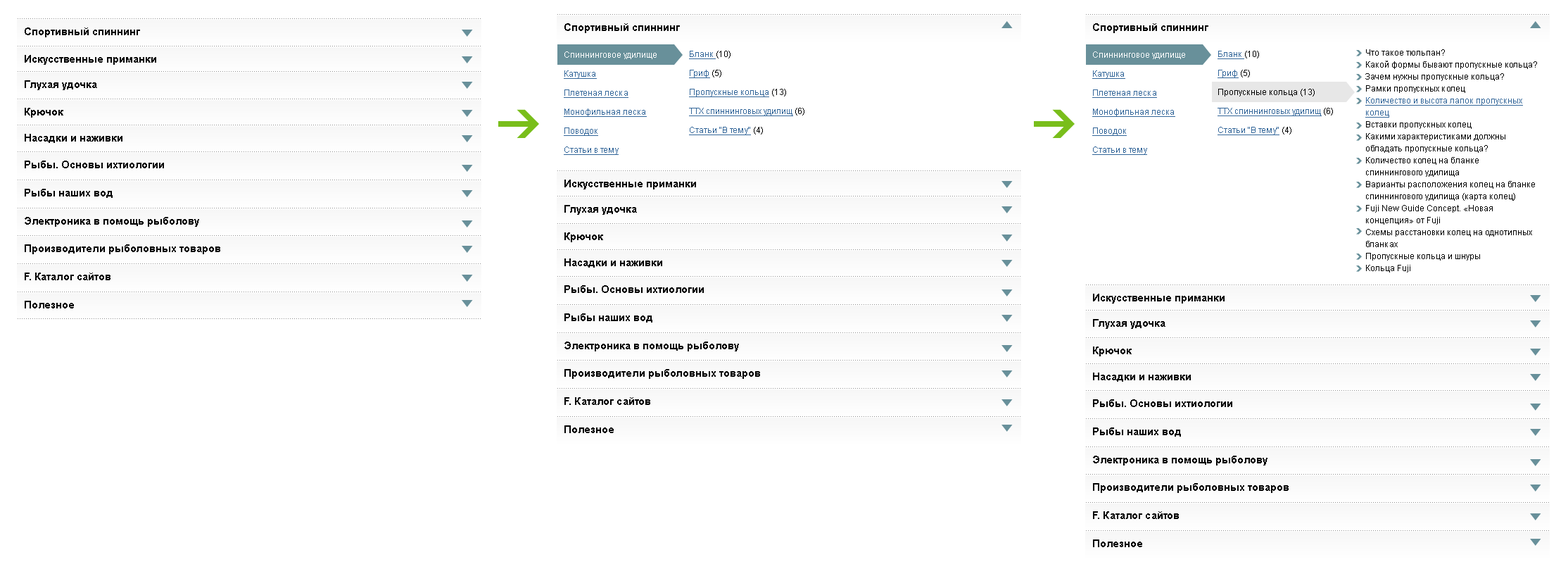
<style>
.page{position:relative;width:1568px;height:581px;background:#ffffff}
.page>*{position:absolute;margin:0}
.t1{font:10.6px "Arial-BoldMT";color:#000000}
.t2{font:8.4px/19px "ArialMT";color:#336699;text-decoration:underline}
.t3{font:8.4px/19px "ArialMT";color:#ffffff}
.t4{font:8.4px/19px "ArialMT";color:#000000}
.t5{font:8.4px/12px "ArialMT";color:#000000}
.t6{font:8.4px/12px "ArialMT";color:#336699;text-decoration:underline}
</style>
<div class="page">
<p class="t1" style="left:25px;top:27px;width:115px;height:10px">Спортивный спиннинг</p>
<p class="t1" style="left:564px;top:23px;width:116px;height:10px">Спортивный спиннинг</p>
<p class="t1" style="left:1093px;top:23px;width:115px;height:10px">Спортивный спиннинг</p>
<p class="t2" style="left:564px;top:51px;width:93px;height:104px"><span class="t3">Спиннинговое удилище<br></span>Катушка<br>Плетеная леска<br>Монофильная леска<br>Поводок<br>Статьи в тему</p>
<p class="t2" style="left:689px;top:51px;width:115px;height:84px">Бланк <span class="t4">(10)<br></span>Гриф<span class="t4"> (5)<br></span>Пропускные кольца<span class="t4"> (13)<br></span>ТТХ спиннинговых удилищ<span class="t4"> (6)<br></span>Статьи "В тему"<span class="t4"> (4)</span></p>
<p class="t2" style="left:1092px;top:51px;width:93px;height:104px"><span class="t3">Спиннинговое удилище<br></span>Катушка<br>Плетеная леска<br>Монофильная леска<br>Поводок<br>Статьи в тему</p>
<p class="t4" style="left:1218px;top:51px;width:115px;height:84px"><span class="t2">Бланк </span>(10)<br><span class="t2">Гриф</span> (5)<br>Пропускные кольца (13)<br><span class="t2">ТТХ спиннинговых удилищ</span> (6)<br><span class="t2">Статьи "В тему"</span> (4)</p>
<p class="t5" style="left:1365px;top:49px;width:172px;height:223px">Что такое тюльпан?<br>Какой формы бывают пропускные кольца?<br>Зачем нужны пропускные кольца?<br>Рамки пропускных колец<br><span class="t6">Количество и высота лапок пропускных колец<br></span>Вставки пропускных колец<br>Какими характеристиками должны обладать пропускные кольца?<br>Количество колец на бланке спиннингового удилища<br>Варианты расположения колец на бланке спиннингового удилища (карта колец)<br>Fuji New Guide Concept. «Новая концепция» от Fuji<br>Схемы расстановки колец на однотипных бланках<br>Пропускные кольца и шнуры<br>Кольца Fuji</p>
<p class="t1" style="left:25px;top:55px;width:131px;height:10px">Искусственные приманки</p>
<p class="t1" style="left:25px;top:80px;width:72px;height:10px">Глухая удочка</p>
<p class="t1" style="left:25px;top:108px;width:38px;height:10px">Крючок</p>
<p class="t1" style="left:25px;top:134px;width:97px;height:9px">Насадки и наживки</p>
<p class="t1" style="left:25px;top:160px;width:139px;height:8px">Рыбы. Основы ихтиологии</p>
<p class="t1" style="left:564px;top:179px;width:132px;height:10px">Искусственные приманки</p>
<p class="t1" style="left:25px;top:189px;width:88px;height:9px">Рыбы наших вод</p>
<p class="t1" style="left:564px;top:205px;width:73px;height:10px">Глухая удочка</p>
<p class="t1" style="left:25px;top:217px;width:174px;height:10px">Электроника в помощь рыболову</p>
<p class="t1" style="left:564px;top:232px;width:39px;height:10px">Крючок</p>
<p class="t1" style="left:25px;top:244px;width:195px;height:10px">Производители рыболовных товаров</p>
<p class="t1" style="left:564px;top:258px;width:98px;height:9px">Насадки и наживки</p>
<p class="t1" style="left:25px;top:272px;width:85px;height:8px">F. Каталог сайтов</p>
<p class="t1" style="left:564px;top:285px;width:140px;height:8px">Рыбы. Основы ихтиологии</p>
<p class="t1" style="left:1093px;top:293px;width:132px;height:10px">Искусственные приманки</p>
<p class="t1" style="left:25px;top:301px;width:49px;height:7px">Полезное</p>
<p class="t1" style="left:564px;top:313px;width:88px;height:9px">Рыбы наших вод</p>
<p class="t1" style="left:1093px;top:319px;width:72px;height:10px">Глухая удочка</p>
<p class="t1" style="left:564px;top:341px;width:175px;height:10px">Электроника в помощь рыболову</p>
<p class="t1" style="left:1093px;top:346px;width:39px;height:10px">Крючок</p>
<p class="t1" style="left:564px;top:369px;width:196px;height:10px">Производители рыболовных товаров</p>
<p class="t1" style="left:1093px;top:372px;width:98px;height:9px">Насадки и наживки</p>
<p class="t1" style="left:564px;top:397px;width:86px;height:8px">F. Каталог сайтов</p>
<p class="t1" style="left:1093px;top:399px;width:139px;height:8px">Рыбы. Основы ихтиологии</p>
<p class="t1" style="left:564px;top:425px;width:50px;height:8px">Полезное</p>
<p class="t1" style="left:1093px;top:427px;width:88px;height:9px">Рыбы наших вод</p>
<p class="t1" style="left:1093px;top:455px;width:174px;height:10px">Электроника в помощь рыболову</p>
<p class="t1" style="left:1093px;top:483px;width:196px;height:10px">Производители рыболовных товаров</p>
<p class="t1" style="left:1093px;top:511px;width:86px;height:8px">F. Каталог сайтов</p>
<p class="t1" style="left:1093px;top:539px;width:49px;height:8px">Полезное</p>
</div>
